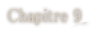
<style>
.page{position:relative;width:104px;height:31px;background:#ffffff}
.page>*{position:absolute;margin:0}
.t1{font:19px "MS-PMincho";color:#d6cdc1;font-weight:bold;scale:0.84 1}
</style>
<div class="page">
<p class="t1" style="left:8px;top:8px;width:73px;height:17px">Chapitre 9</p>
</div>
